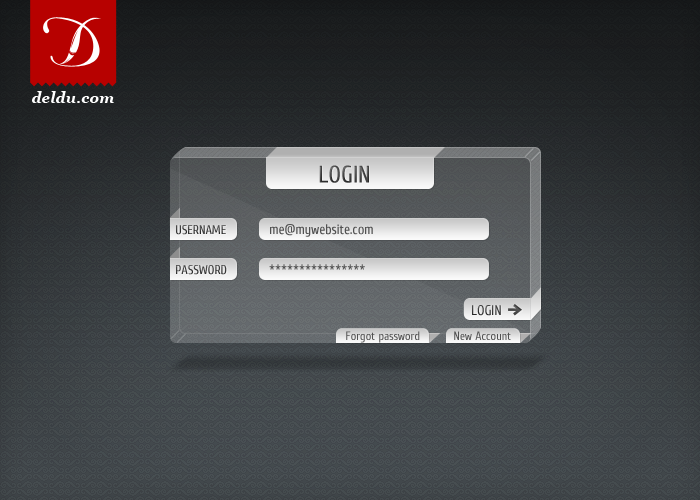
<style>
.page{position:relative;width:700px;height:500px}
.page>*{position:absolute;margin:0}
.t1{font:24px "Cuprum";text-transform:uppercase}
.t2{font:18px "Cuprum";color:#3e3e3e;font-variant:small-caps}
.t3{font:14px "Cuprum";color:#525252}
.t4{font:18px "Cuprum";color:#3d3d3d;font-variant:small-caps}
.t5{font:14px "Cuprum";color:#3d3d3d;text-transform:uppercase}
.t6{font:12px "Cuprum";color:#525252}
</style>
<div class="page">
<p class="t1" style="left:319px;top:165px;width:50px;height:18px">login</p>
<p class="t2" style="left:176px;top:225px;width:50px;height:10px">username</p>
<p class="t3" style="left:270px;top:224px;width:103px;height:13px">me@mywebsite.com</p>
<p class="t4" style="left:176px;top:265px;width:51px;height:10px">password</p>
<p class="t3" style="left:269px;top:264px;width:96px;height:6px">****************</p>
<p class="t5" style="left:472px;top:305px;width:29px;height:11px">login</p>
<p class="t6" style="left:346px;top:331px;width:74px;height:12px">Forgot password</p>
<p class="t6" style="left:454px;top:331px;width:57px;height:9px">New Account</p>
</div>
